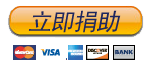
<style>
.page{position:relative;width:150px;height:66px;background:#ffffff}
.page>*{position:absolute;margin:0}
.t1{font:24px "SimHei";letter-spacing:-0.05em;color:#1f275f;font-style:italic}
</style>
<div class="page">
<p class="t1" style="left:28px;top:10px;width:93px;height:23px">立即捐助</p>
</div>
